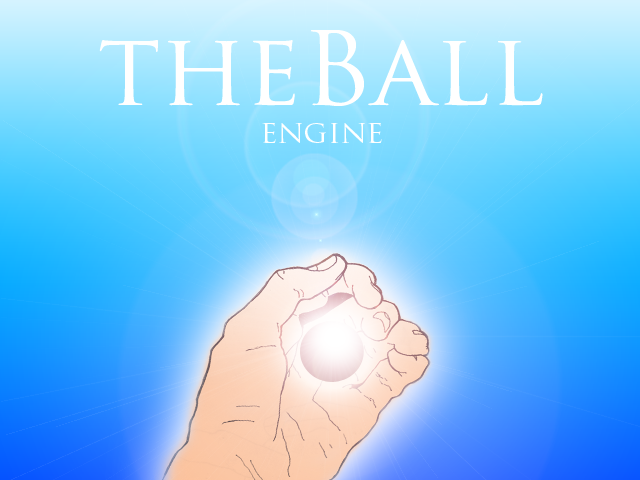
<style>
.page{position:relative;width:640px;height:480px}
.page>*{position:absolute;margin:0}
.t1{font:99.9px "TrajanPro-Regular";color:#ffffff}
.t2{font:31.2px "TrajanPro-Regular";color:#ffffff}
</style>
<div class="page">
<p class="t1" style="left:99px;top:30px;width:444px;height:113px;text-align:center">theBall<br><span class="t2">engine</span></p>
</div>
